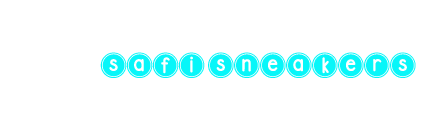
<style>
.page{position:relative;width:431px;height:116px;background:#ffffff}
.page>*{position:absolute;margin:0}
.t1{font:20px "DJBPokeyDots";color:#07f6f9}
</style>
<div class="page">
<p class="t1" style="left:100px;top:52px;width:105px;height:26px">safi</p>
<p class="t1" style="left:208px;top:52px;width:208px;height:26px">sneakers</p>
</div>
